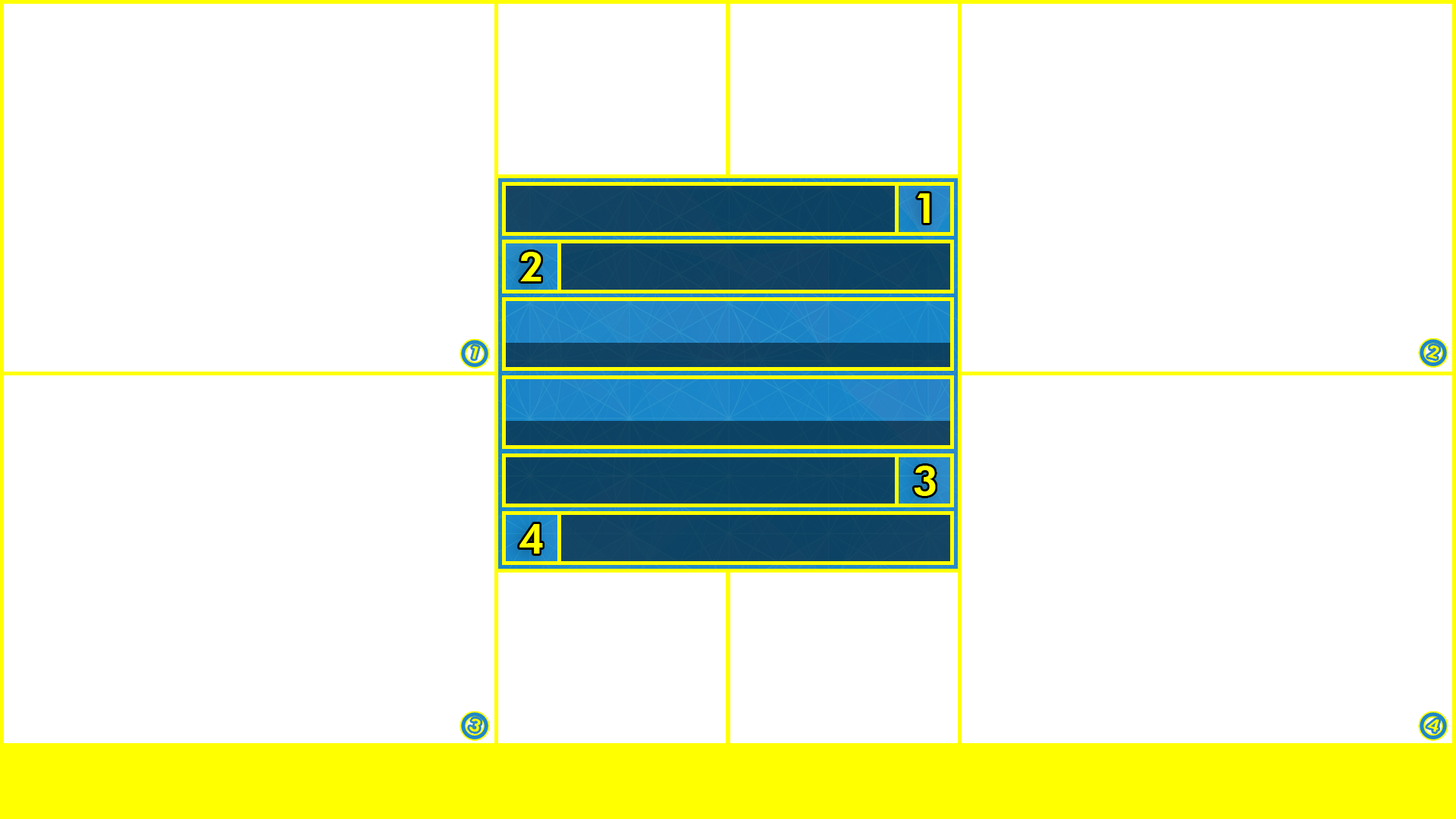
<style>
.page{position:relative;width:1456px;height:819px;background:#ffffff}
.page>*{position:absolute;margin:0}
.t1{font:41.7px "FuturaBT-Heavy";color:#ffff00}
.t2{font:17.6px "FuturaBT-Heavy";color:#ffff00;scale:1.1 1}
</style>
<div class="page">
<p class="t1" style="left:918px;top:193px;width:12px;height:30px">1</p>
<p class="t1" style="left:520px;top:252px;width:21px;height:29px">2</p>
<p class="t2" style="left:472px;top:346px;width:7px;height:13px;rotate:15deg">1</p>
<p class="t2" style="left:1427px;top:345px;width:12px;height:14px;rotate:15deg">2</p>
<p class="t1" style="left:914px;top:466px;width:22px;height:30px">3</p>
<p class="t1" style="left:519px;top:524px;width:24px;height:30px">4</p>
<p class="t2" style="left:469px;top:718px;width:12px;height:14px;rotate:15deg">3</p>
<p class="t2" style="left:1427px;top:719px;width:12px;height:14px;rotate:15deg">4</p>
</div>
